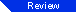
<style>
.page{position:relative;width:76px;height:12px;background:#0030e5}
.page>*{position:absolute;margin:0}
.t1{font:10px "ArialMT";color:#ffffff}
</style>
<div class="page">
<p class="t1" style="left:28px;top:2px;width:31px;height:7px">Review</p>
</div>
